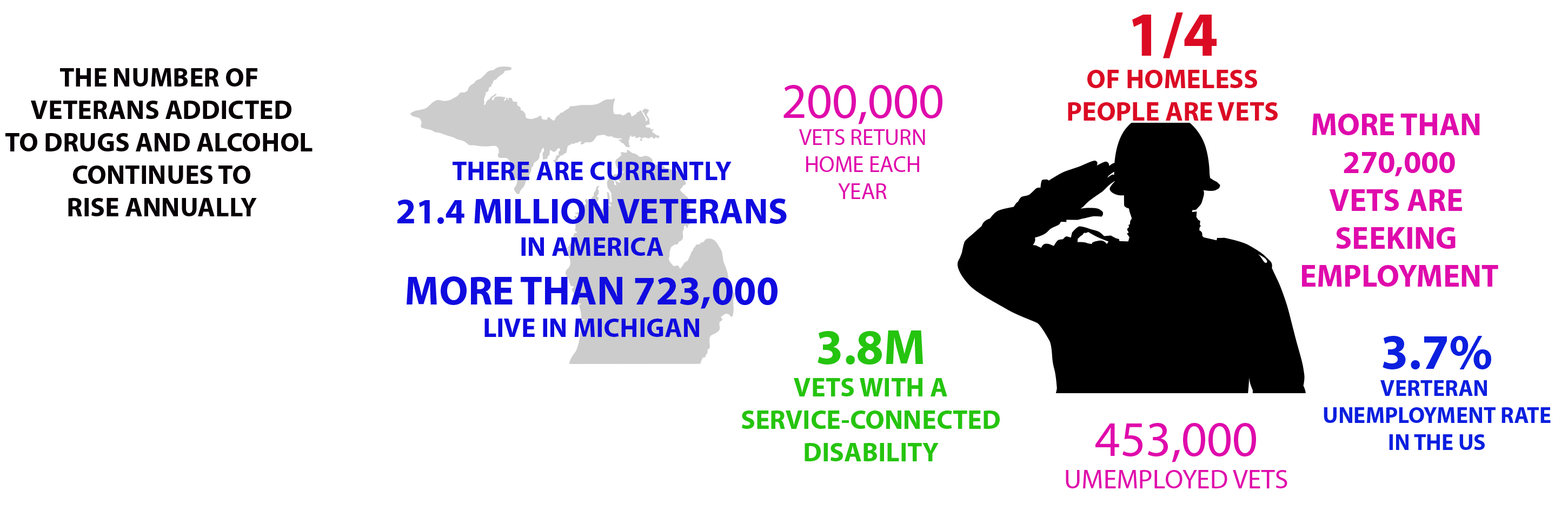
<style>
.page{position:relative;width:1568px;height:510px;background:#ffffff}
.page>*{position:absolute;margin:0}
.t1{font:27px "MyriadPro-Bold";color:#db0b24}
.t2{font:63.1px "MyriadPro-Bold";color:#db0b24}
.t3{font:6.5px "MyriadPro-Bold";color:#070105}
.t4{font:22.5px "MyriadPro-Regular";color:#df0bab}
.t5{font:49.6px "MyriadPro-Regular";color:#df0bab}
.t6{font:31.5px "MyriadPro-Bold";color:#df0bab}
.t7{font:36px "MyriadPro-Bold";color:#100bdf}
.t8{font:6.5px "MyriadPro-Bold";color:#100bdf}
.t9{font:40.6px "MyriadPro-Bold";color:#100bdf}
.t10{font:27px "MyriadPro-Bold";color:#25c40f}
.t11{font:49.6px "MyriadPro-Bold";color:#25c40f}
.t12{font:22.5px "MyriadPro-Bold";color:#0b1fdf}
.t13{font:49.6px "MyriadPro-Bold";color:#0b1fdf}
.t14{font:27px "MyriadPro-Regular";color:#df0bab}
</style>
<div class="page">
<p class="t1" style="left:1068px;top:12px;width:210px;height:109px;text-align:center"><span class="t2">1/4<br></span>OF HOMELESS<br>PEOPLE ARE VETS</p>
<p class="t3" style="left:5px;top:68px;width:308px;height:148px;text-align:center">THE NUMBER OF <br>VETERANS ADDICTED<br>TO DRUGS AND ALCOHOL <br>CONTINUES TO<br>RISE ANNUALLY</p>
<p class="t4" style="left:783px;top:85px;width:159px;height:114px;text-align:center"><span class="t5">200,000<br></span>VETS RETURN<br>HOME EACH<br>YEAR</p>
<p class="t6" style="left:1302px;top:114px;width:196px;height:173px;text-align:center">MORE THAN <br>270,000<br>VETS ARE <br>SEEKING <br>EMPLOYMENT</p>
<p class="t7" style="left:397px;top:162px;width:390px;height:175px;text-align:center"><span class="t8">THERE ARE CURRENTLY<br></span>21.4 MILLION VETERANS<br><span class="t8">IN AMERICA<br></span><span class="t9">MORE THAN 723,000<br></span><span class="t8">LIVE IN MICHIGAN</span></p>
<p class="t10" style="left:742px;top:330px;width:258px;height:131px;text-align:center"><span class="t11">3.8M<br></span>VETS WITH A<br>SERVICE-CONNECTED<br>DISABILITY</p>
<p class="t12" style="left:1324px;top:336px;width:227px;height:114px;text-align:center"><span class="t13">3.7%<br></span>VERTERAN <br>UNEMPLOYMENT RATE<br>IN THE US</p>
<p class="t14" style="left:1066px;top:423px;width:221px;height:65px;text-align:center"><span class="t5">453,000<br></span>UMEMPLOYED VETS</p>
</div>
